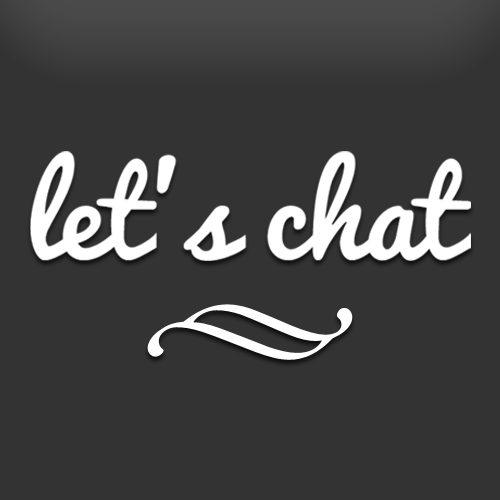
<style>
.page{position:relative;width:500px;height:500px;background:#333333}
.page>*{position:absolute;margin:0}
.t1{font:116.3px "Pacifico-Regular";color:#ffffff}
</style>
<div class="page">
<p class="t1" style="left:30px;top:151px;width:441px;height:110px">let’s chat</p>
</div>
